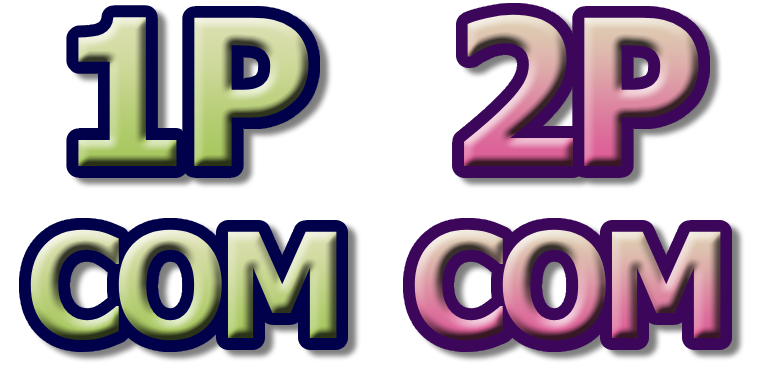
<style>
.page{position:relative;width:768px;height:384px;background:#ffffff}
.page>*{position:absolute;margin:0}
.t1{font:204px "Tahoma-Bold";letter-spacing:-0.05em}
.t2{font:146px "Tahoma-Bold";letter-spacing:-0.065em}
</style>
<div class="page">
<p class="t1" style="left:78px;top:17px;width:231px;height:149px">1P</p>
<p class="t1" style="left:464px;top:14px;width:235px;height:152px">2P</p>
<p class="t2" style="left:30px;top:229px;width:307px;height:112px">COM</p>
<p class="t2" style="left:414px;top:229px;width:307px;height:112px">COM</p>
</div>
